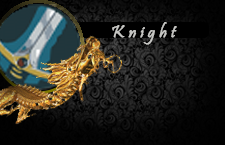
<style>
.page{position:relative;width:225px;height:145px}
.page>*{position:absolute;margin:0}
.t1{font:18px "Pristina-Regular";color:#c6c6c3;font-weight:bold}
</style>
<div class="page">
<p class="t1" style="left:112px;top:22px;width:65px;height:23px">K n i g h t</p>
</div>
